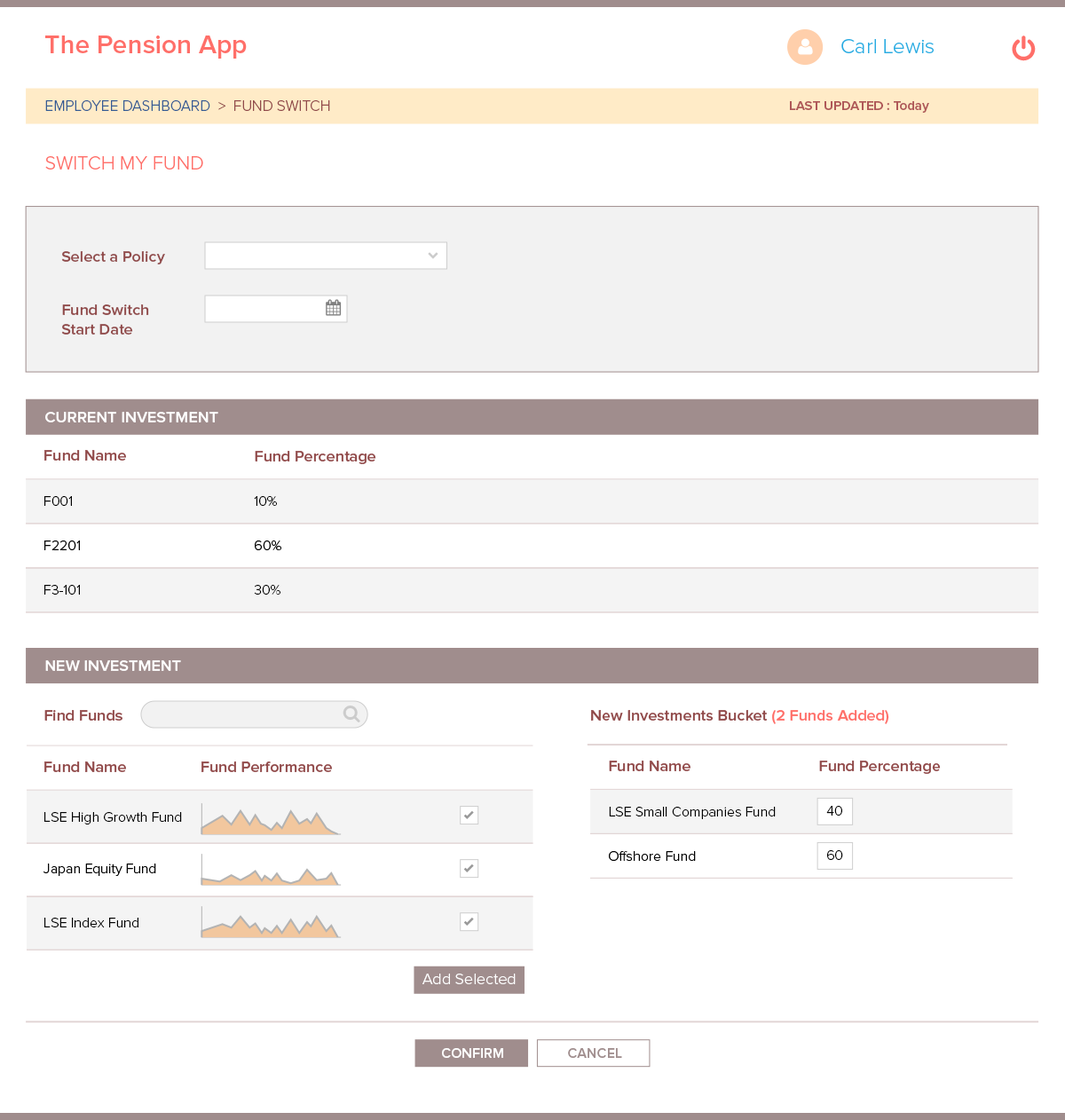
<style>
.page{position:relative;width:1065px;height:1120px;background:#ffffff}
.page>*{position:absolute;margin:0}
.t1{font:26.6px "ProximaNova-Semibold";color:#ff6f69}
.t2{font:21.3px "ProximaNova-Light";color:#29abe2}
.t3{font:15.1px "ProximaNova-Light";color:#345b94}
.t4{font:15.1px "ProximaNova-Light";color:#914a4a}
.t5{font:13.3px "ProximaNova-Semibold";color:#af5858}
.t6{font:19.5px "ProximaNova-Light";color:#ff6f69}
.t7{font:16px "ProximaNova-Semibold";color:#914a4a}
.t8{font:16px "ProximaNova-Semibold";color:#ffffff}
.t9{font:15.2px "ProximaNova-Semibold";color:#914a4a;scale:1.05 1}
.t10{font:14.2px "ProximaNova-Light";color:#000000}
.t11{font:16px "ProximaNova-Semibold";color:#ff6f69}
.t12{font:16px "ProximaNova-Light";color:#ffffff}
.t13{font:14.2px "ProximaNova-Semibold";color:#ffffff}
.t14{font:14.2px "ProximaNova-Semibold";color:#a08d8d}
</style>
<div class="page">
<p class="t1" style="left:45px;top:35px;width:202px;height:24px">The Pension App</p>
<p class="t2" style="left:841px;top:39px;width:92px;height:14px">Carl Lewis</p>
<p class="t3" style="left:45px;top:100px;width:285px;height:11px">EMPLOYEE DASHBOARD<span class="t4">  &gt;  FUND SWITCH</span></p>
<p class="t5" style="left:790px;top:101px;width:139px;height:12px">LAST UPDATED : Today</p>
<p class="t6" style="left:45px;top:156px;width:158px;height:13px">SWITCH MY FUND</p>
<p class="t7" style="left:61px;top:251px;width:104px;height:13px">Select a Policy</p>
<p class="t7" style="left:61px;top:304px;width:88px;height:31px">Fund Switch<br>Start Date</p>
<p class="t8" style="left:45px;top:412px;width:173px;height:10px">CURRENT INVESTMENT</p>
<p class="t7" style="left:44px;top:450px;width:82px;height:11px">Fund Name</p>
<p class="t9" style="left:255px;top:451px;width:121px;height:13px">Fund Percentage</p>
<p class="t10" style="left:44px;top:496px;width:28px;height:10px">F001</p>
<p class="t10" style="left:254px;top:496px;width:23px;height:10px">10%</p>
<p class="t10" style="left:44px;top:540px;width:36px;height:10px">F2201</p>
<p class="t10" style="left:255px;top:540px;width:26px;height:10px">60%</p>
<p class="t10" style="left:44px;top:585px;width:36px;height:10px">F3-101</p>
<p class="t10" style="left:254px;top:585px;width:26px;height:10px">30%</p>
<p class="t8" style="left:45px;top:660px;width:136px;height:11px">NEW INVESTMENT</p>
<p class="t7" style="left:44px;top:710px;width:78px;height:11px">Find Funds</p>
<p class="t7" style="left:591px;top:710px;width:298px;height:14px">New Investments Bucket <span class="t11">(2 Funds Added)</span></p>
<p class="t7" style="left:44px;top:761px;width:82px;height:11px">Fund Name</p>
<p class="t7" style="left:201px;top:761px;width:131px;height:11px">Fund Performance</p>
<p class="t7" style="left:609px;top:760px;width:81px;height:11px">Fund Name</p>
<p class="t9" style="left:819px;top:760px;width:122px;height:14px">Fund Percentage</p>
<p class="t10" style="left:609px;top:807px;width:167px;height:12px">LSE Small Companies Fund</p>
<p class="t10" style="left:826px;top:806px;width:16px;height:9px">40</p>
<p class="t10" style="left:44px;top:812px;width:138px;height:12px">LSE High Growth Fund</p>
<p class="t10" style="left:609px;top:851px;width:87px;height:11px">Offshore Fund</p>
<p class="t10" style="left:827px;top:850px;width:16px;height:10px">60</p>
<p class="t10" style="left:43px;top:863px;width:113px;height:13px">Japan Equity Fund</p>
<p class="t10" style="left:44px;top:918px;width:94px;height:9px">LSE Index Fund</p>
<p class="t12" style="left:422px;top:973px;width:94px;height:11px">Add Selected</p>
<p class="t13" style="left:442px;top:1048px;width:61px;height:10px">CONFIRM</p>
<p class="t14" style="left:568px;top:1048px;width:54px;height:10px">CANCEL</p>
</div>
